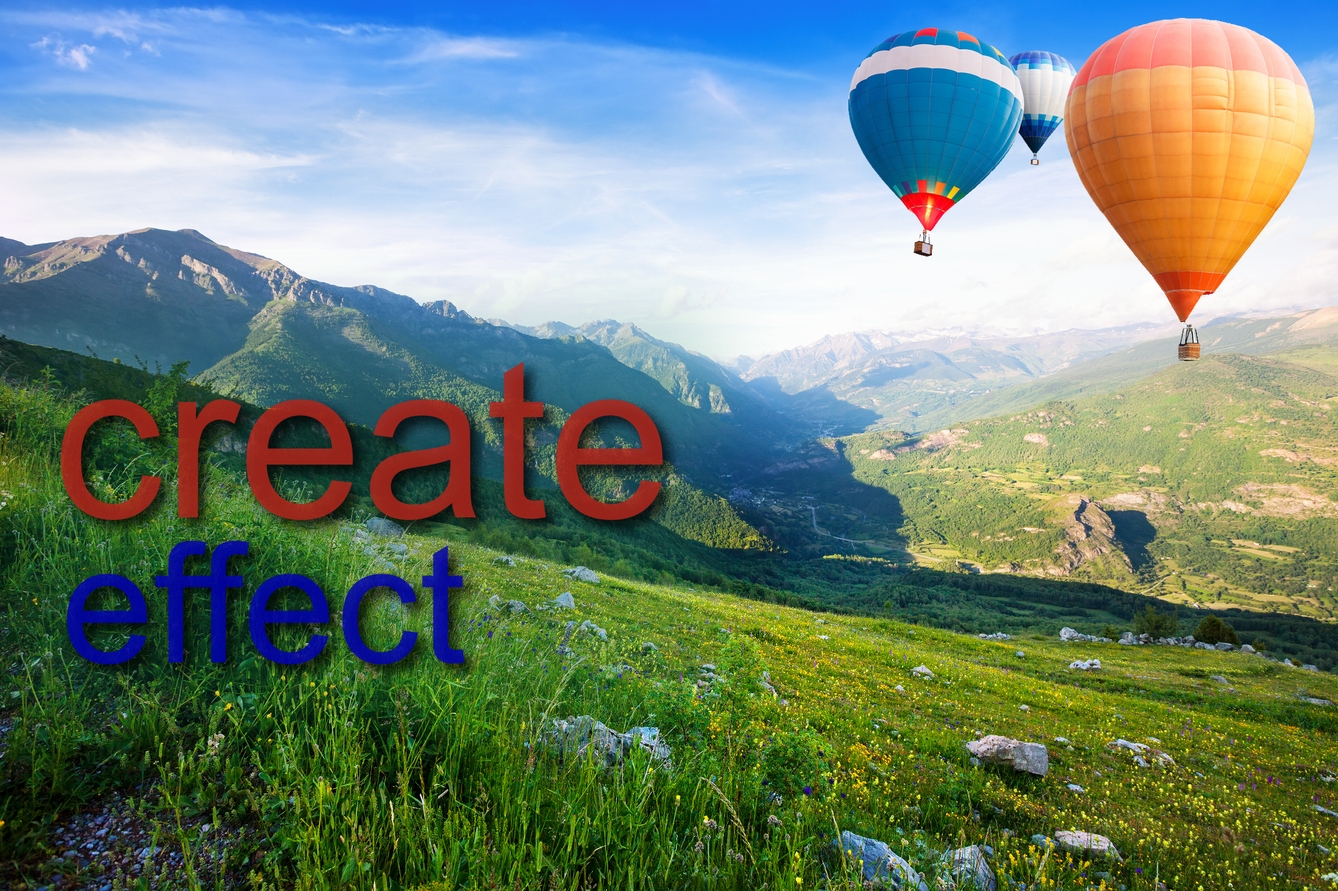
<style>
.page{position:relative;width:1338px;height:891px}
.page>*{position:absolute;margin:0}
.t1{font:222.9px "ArialMT";color:#99261c}
.t2{font:167.2px "ArialMT";color:#050a98}
</style>
<div class="page">
<p class="t1" style="left:61px;top:362px;width:602px;height:158px">create</p>
<p class="t2" style="left:67px;top:541px;width:398px;height:124px">effect</p>
</div>
